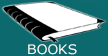
<style>
.page{position:relative;width:108px;height:56px;background:#0c696e}
.page>*{position:absolute;margin:0}
.t1{font:13px "Verdana";color:#fdfef9;scale:1.06 1}
.t2{font:13px "Microsoft-Yi-Baiti";color:#fdfef9;scale:1.06 1}
</style>
<div class="page">
<p class="t1" style="left:28px;top:44px;width:49px;height:11px"><span class="t2">   </span>BOOKS</p>
</div>
